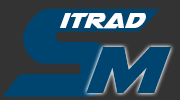
<style>
.page{position:relative;width:180px;height:100px;background:#333333}
.page>*{position:absolute;margin:0}
.t1{font:165.4px "Airstrike";color:#00456f}
.t2{font:28px "Airstrike";color:#ffffff}
.t3{font:86px "Airstrike";color:#00456f}
</style>
<div class="page">
<p class="t1" style="left:3px;top:8px;width:132px;height:89px">S</p>
<p class="t2" style="left:60px;top:13px;width:86px;height:16px">itrad</p>
<p class="t3" style="left:86px;top:47px;width:86px;height:46px">M</p>
</div>
